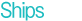
<style>
.page{position:relative;width:82px;height:21px;background:#ffffff}
.page>*{position:absolute;margin:0}
.t1{font:20px "GothicMB101Pro-Regular";letter-spacing:-0.06em;color:#1dbcc0;scale:0.9 1}
</style>
<div class="page">
<p class="t1" style="left:0px;top:1px;width:44px;height:20px">Ships</p>
</div>
